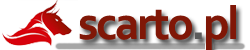
<style>
.page{position:relative;width:250px;height:50px;background:#ffffff}
.page>*{position:absolute;margin:0}
.t1{font:48px "Corbel-Bold";letter-spacing:-0.05em;color:#801707}
.t2{font:48px "Corbel-Bold";letter-spacing:-0.05em;color:#5c5c5c}
</style>
<div class="page">
<p class="t1" style="left:79px;top:5px;width:157px;height:45px">scarto<span class="t2">.</span>pl</p>
</div>
